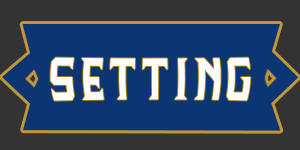
<style>
.page{position:relative;width:300px;height:150px;background:#0c3573}
.page>*{position:absolute;margin:0}
.t1{font:62.5px "Lorde-Havana";letter-spacing:0.1em;color:#ffffff;scale:0.75 1}
</style>
<div class="page">
<p class="t1" style="left:50px;top:57px;width:201px;height:44px">Setting</p>
</div>
